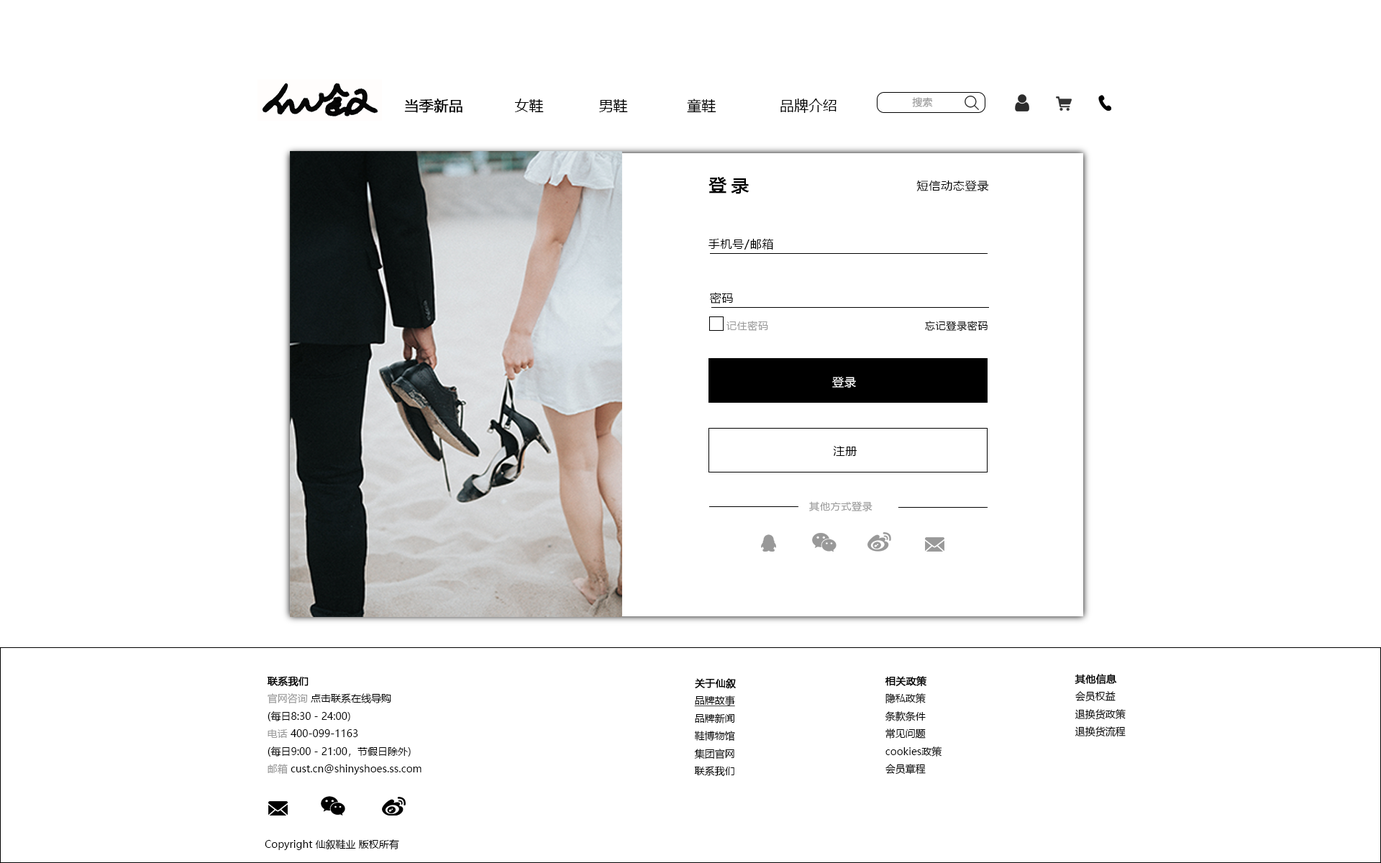
<style>
.page{position:relative;width:1381px;height:863px;background:#ffffff}
.page>*{position:absolute;margin:0}
.t1{font:14.4px "MicrosoftYaHei";color:#000000}
.t2{font:14.4px "MicrosoftYaHei";color:#000000;font-weight:bold}
.t3{font:10.1px "MicrosoftYaHei";color:#999999}
.t4{font:17.3px "MicrosoftYaHei";letter-spacing:0.26em;color:#000000;font-weight:bold}
.t5{font:11.5px "MicrosoftYaHei";letter-spacing:0.05em;color:#000000}
.t6{font:10.1px "MicrosoftYaHei";letter-spacing:0.05em;color:#999999}
.t7{font:10.1px "MicrosoftYaHei";letter-spacing:0.05em;color:#000000}
.t8{font:11.5px "MicrosoftYaHei";letter-spacing:0.05em;color:#ffffff}
.t9{font:10.1px "MicrosoftYaHei";color:#000000}
.t10{font:10.1px "MicrosoftYaHei";color:#000000;font-weight:bold}
.t11{font:10.1px "MicrosoftYaHei";color:#000000;text-decoration:underline}
.t12{font:9.4px "MicrosoftYaHei";color:#000000}
</style>
<div class="page">
<p class="t1" style="left:404px;top:99px;width:433px;height:14px"><span class="t2">当季新品 </span>           女鞋             男鞋              童鞋               品牌介绍</p>
<p class="t3" style="left:912px;top:97px;width:21px;height:10px">搜索</p>
<p class="t4" style="left:709px;top:177px;width:40px;height:17px">登录</p>
<p class="t5" style="left:917px;top:180px;width:72px;height:11px">短信动态登录</p>
<p class="t5" style="left:709px;top:238px;width:64px;height:12px">手机号/邮箱</p>
<p class="t5" style="left:709px;top:292px;width:24px;height:12px">密码</p>
<p class="t6" style="left:727px;top:321px;width:41px;height:10px">记住密码</p>
<p class="t7" style="left:925px;top:321px;width:63px;height:10px">忘记登录密码</p>
<p class="t8" style="left:832px;top:376px;width:24px;height:12px">登录</p>
<p class="t5" style="left:833px;top:446px;width:25px;height:10px">注册</p>
<p class="t6" style="left:809px;top:501px;width:64px;height:10px">其他方式登录</p>
<p class="t9" style="left:267px;top:676px;width:155px;height:99px"><span class="t10">联系我们<br></span><span class="t3">官网咨询</span> 点击联系在线导购<br>(每日8:30 - 24:00)<br><span class="t3">电话 </span>400-099-1163<br>(每日9:00 - 21:00，节假日除外)<br><span class="t3">邮箱 </span>cust.cn@shinyshoes.ss.com</p>
<p class="t9" style="left:885px;top:676px;width:57px;height:99px"><span class="t10">相关政策<br></span>隐私政策<br>条款条件<br>常见问题<br>cookies政策<br>会员章程</p>
<p class="t9" style="left:1075px;top:674px;width:51px;height:63px"><span class="t10">其他信息<br></span>会员权益<br>退换货政策<br>退换货流程</p>
<p class="t9" style="left:694px;top:678px;width:42px;height:99px"><span class="t10">关于仙叙<br></span><span class="t11">品牌故事<br></span>品牌新闻<br>鞋博物馆<br>集团官网<br>联系我们</p>
<p class="t9" style="left:265px;top:840px;width:134px;height:10px">Copyright 仙叙鞋业 版权所有<br><span class="t12"><br>Copyright 仙叙鞋业 版权所有</span></p>
</div>
